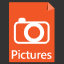
<style>
.page{position:relative;width:64px;height:64px;background:#f05626}
.page>*{position:absolute;margin:0}
.t1{font:12px "SegoeUI-SemiBold";letter-spacing:-0.02em;color:#ffffff}
</style>
<div class="page">
<p class="t1" style="left:11px;top:50px;width:41px;height:9px">Pictures</p>
</div>
